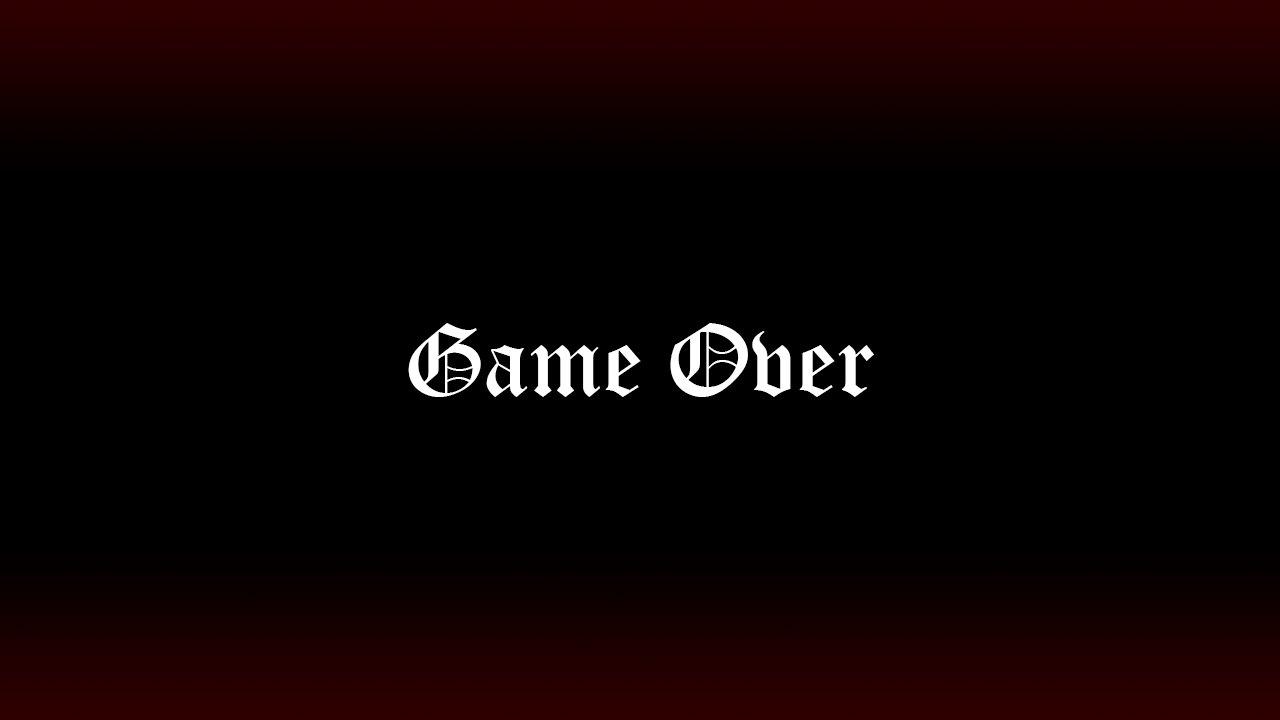
<style>
.page{position:relative;width:1280px;height:720px;background:#000000}
.page>*{position:absolute;margin:0}
.t1{font:100px "OldEnglishTextMT";color:#ffffff}
</style>
<div class="page">
<p class="t1" style="left:408px;top:323px;width:466px;height:74px">Game Over</p>
</div>
